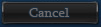
<style>
.page{position:relative;width:101px;height:27px}
.page>*{position:absolute;margin:0}
.t1{font:14px "Sylfaen";color:#6c6b6b}
</style>
<div class="page">
<p class="t1" style="left:29px;top:8px;width:40px;height:9px">Cancel</p>
</div>
